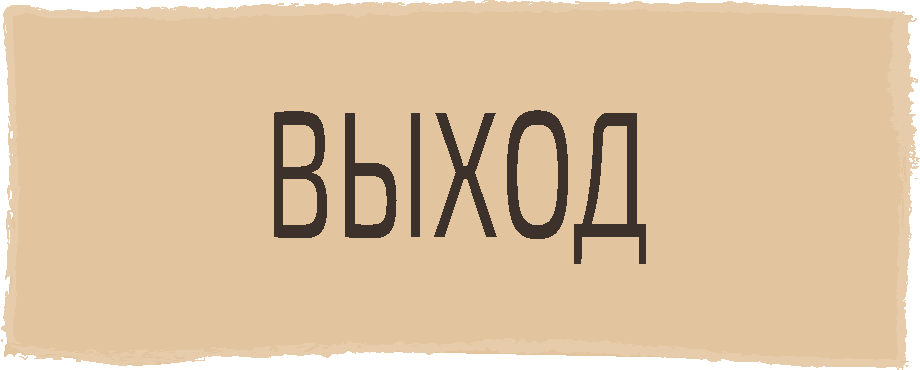
<style>
.page{position:relative;width:920px;height:370px;background:#e2c59f}
.page>*{position:absolute;margin:0}
.t1{font:180.2px "Exo2-Regular";color:#3d312b;text-transform:uppercase;scale:0.62 1}
</style>
<div class="page">
<p class="t1" style="left:274px;top:110px;width:372px;height:154px">выход</p>
</div>
